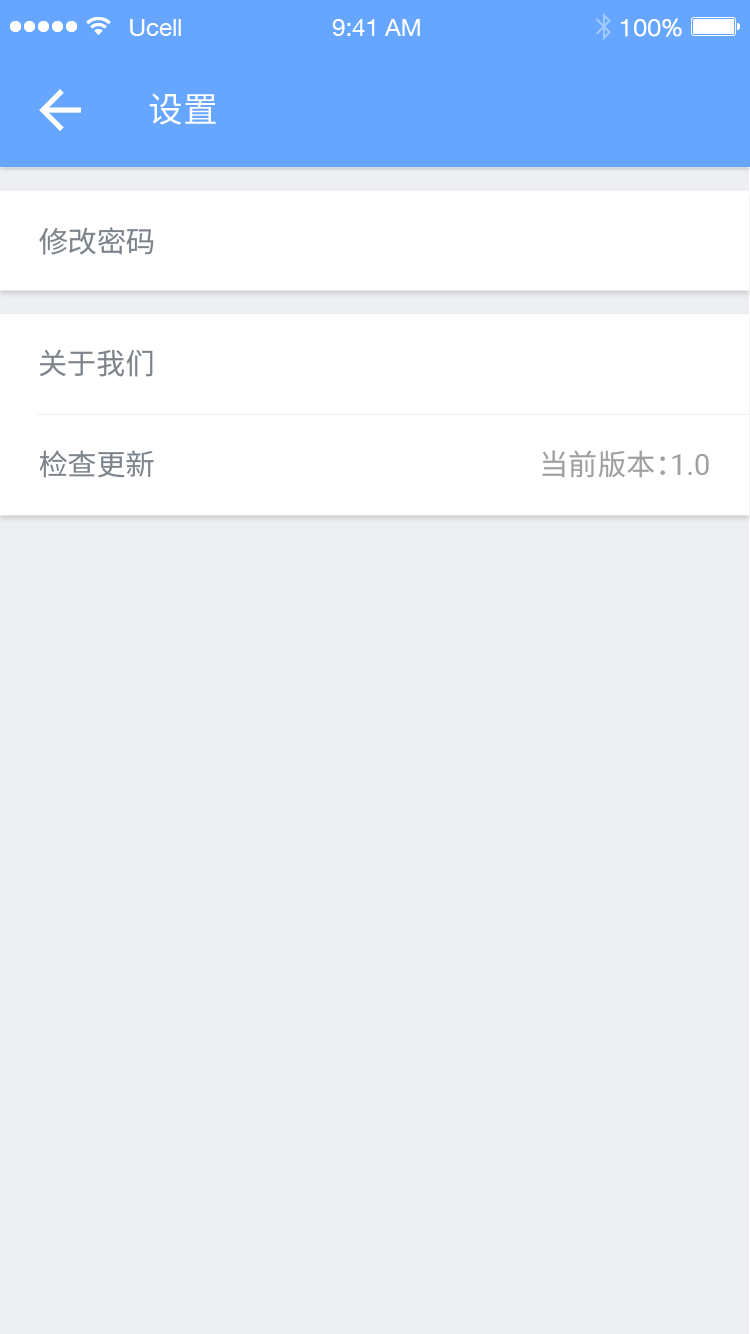
<style>
.page{position:relative;width:750px;height:1334px;background:#edeff2}
.page>*{position:absolute;margin:0}
.t1{font:34.7px "NotoSansHans-Regular";color:#ffffff}
.t2{font:29.2px "NotoSansHans-Regular";color:#7e848c}
.t3{font:29.2px "NotoSansHans-Regular";color:#a0a0a0}
.t4{font:29.2px "Roboto-Regular";color:#a0a0a0}
</style>
<div class="page">
<p class="t1" style="left:149px;top:93px;width:67px;height:32px">设置</p>
<p class="t2" style="left:39px;top:227px;width:115px;height:28px">修改密码</p>
<p class="t2" style="left:39px;top:349px;width:114px;height:28px">关于我们</p>
<p class="t2" style="left:39px;top:450px;width:115px;height:28px">检查更新</p>
<p class="t3" style="left:542px;top:450px;width:167px;height:28px">当前版本：<span class="t4">1.0</span></p>
</div>
